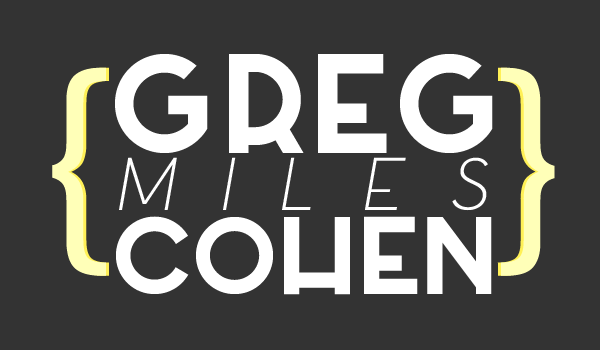
<style>
.page{position:relative;width:600px;height:350px;background:#333333}
.page>*{position:absolute;margin:0}
.t1{font:189.3px "Azedo-Bold";color:#ffffff}
.t2{font:249.1px "FranklinGothic-Book";color:#ffffb8}
.t3{font:99.6px "Azedo-Light";color:#ffffff;font-style:italic}
.t4{font:147.4px "Azedo-Bold";color:#ffffff}
</style>
<div class="page">
<p class="t1" style="left:115px;top:54px;width:378px;height:99px">GREG</p>
<p class="t2" style="left:52px;top:67px;width:54px;height:209px">{</p>
<p class="t2" style="left:55px;top:67px;width:54px;height:209px">{</p>
<p class="t2" style="left:497px;top:67px;width:55px;height:209px">}</p>
<p class="t2" style="left:500px;top:67px;width:55px;height:209px">}</p>
<p class="t3" style="left:119px;top:157px;width:369px;height:54px">M I L E S</p>
<p class="t4" style="left:116px;top:216px;width:376px;height:79px">COHEN</p>
</div>
